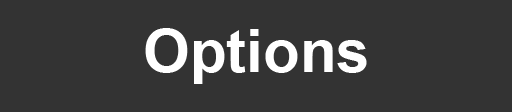
<style>
.page{position:relative;width:512px;height:112px;background:#333333}
.page>*{position:absolute;margin:0}
.t1{font:60px "Arial-BoldMT";color:#ffffff}
</style>
<div class="page">
<p class="t1" style="left:145px;top:28px;width:222px;height:56px">Options</p>
</div>
